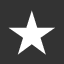
<style>
.page{position:relative;width:64px;height:64px;background:#333333}
.page>*{position:absolute;margin:0}
.t1{font:52px "MS-Gothic";color:#ffffff}
</style>
<div class="page">
<p class="t1" style="left:8px;top:10px;width:47px;height:45px">★</p>
</div>
